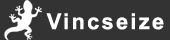
<style>
.page{position:relative;width:170px;height:40px;background:#333333}
.page>*{position:absolute;margin:0}
.t1{font:22px "Arial-BoldMT";letter-spacing:0.1em;color:#ffffff}
</style>
<div class="page">
<p class="t1" style="left:46px;top:13px;width:118px;height:17px">Vincseize</p>
</div>
